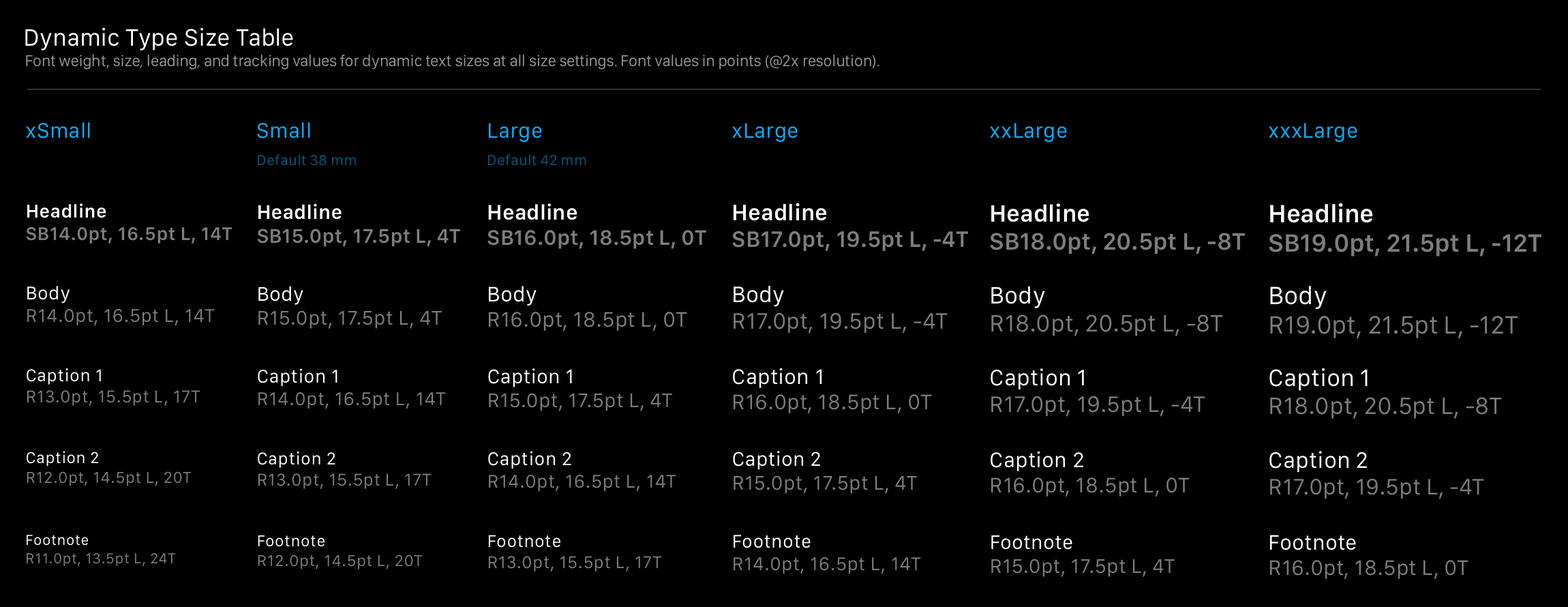
<style>
.page{position:relative;width:1568px;height:607px;background:#000000}
.page>*{position:absolute;margin:0}
.t1{font:24.5px "SanFranciscoText-Regular";letter-spacing:-0.005em;color:#ffffff}
.t2{font:16.4px "SanFranciscoDisplay-Regular";letter-spacing:-0.005em;color:#999999}
.t3{font:21.8px "SanFranciscoText-Regular";color:#06b0ff}
.t4{font:15px "SanFranciscoText-Regular";color:#035880}
.t5{font:19.1px/22.5px "SanFranciscoText-Semibold";letter-spacing:0.014em;color:#7d7d7d}
.t6{font:19.1px/22.5px "SanFranciscoText-Semibold";letter-spacing:0.014em;color:#ffffff}
.t7{font:20.5px/23.9px "SanFranciscoText-Semibold";letter-spacing:0.004em;color:#7d7d7d}
.t8{font:20.5px/23.9px "SanFranciscoText-Semibold";letter-spacing:0.004em;color:#ffffff}
.t9{font:21.8px/25.2px "SanFranciscoText-Semibold";color:#7d7d7d}
.t10{font:21.8px/25.2px "SanFranciscoText-Semibold";color:#ffffff}
.t11{font:23.2px/26.6px "SanFranciscoText-Semibold";letter-spacing:-0.004em;color:#7d7d7d}
.t12{font:23.2px/26.6px "SanFranciscoText-Semibold";letter-spacing:-0.004em;color:#ffffff}
.t13{font:24.5px/28px "SanFranciscoText-Semibold";letter-spacing:-0.008em;color:#7d7d7d}
.t14{font:24.5px/28px "SanFranciscoText-Semibold";letter-spacing:-0.008em;color:#ffffff}
.t15{font:25.9px/29.3px "SanFranciscoText-Semibold";letter-spacing:-0.012em;color:#7d7d7d}
.t16{font:25.9px/29.3px "SanFranciscoText-Semibold";letter-spacing:-0.012em;color:#ffffff}
.t17{font:19.1px/22.5px "SanFranciscoText-Regular";letter-spacing:0.014em;color:#7d7d7d}
.t18{font:19.1px/22.5px "SanFranciscoText-Regular";letter-spacing:0.014em;color:#ffffff}
.t19{font:20.5px/23.9px "SanFranciscoText-Regular";letter-spacing:0.004em;color:#7d7d7d}
.t20{font:20.5px/23.9px "SanFranciscoText-Regular";letter-spacing:0.004em;color:#ffffff}
.t21{font:21.8px/25.2px "SanFranciscoText-Regular";color:#7d7d7d}
.t22{font:21.8px/25.2px "SanFranciscoText-Regular";color:#ffffff}
.t23{font:23.2px/26.6px "SanFranciscoText-Regular";letter-spacing:-0.004em;color:#7d7d7d}
.t24{font:23.2px/26.6px "SanFranciscoText-Regular";letter-spacing:-0.004em;color:#ffffff}
.t25{font:24.5px/28px "SanFranciscoText-Regular";letter-spacing:-0.008em;color:#7d7d7d}
.t26{font:24.5px/28px "SanFranciscoText-Regular";letter-spacing:-0.008em;color:#ffffff}
.t27{font:25.9px/29.3px "SanFranciscoText-Regular";letter-spacing:-0.012em;color:#7d7d7d}
.t28{font:25.9px/29.3px "SanFranciscoText-Regular";letter-spacing:-0.012em;color:#ffffff}
.t29{font:17.7px/21.1px "SanFranciscoText-Regular";letter-spacing:0.017em;color:#7d7d7d}
.t30{font:17.7px/21.1px "SanFranciscoText-Regular";letter-spacing:0.017em;color:#ffffff}
.t31{font:16.4px/19.8px "SanFranciscoText-Regular";letter-spacing:0.02em;color:#7d7d7d}
.t32{font:16.4px/19.8px "SanFranciscoText-Regular";letter-spacing:0.02em;color:#ffffff}
.t33{font:15px/18.4px "SanFranciscoText-Regular";letter-spacing:0.024em;color:#7d7d7d}
.t34{font:15px/18.4px "SanFranciscoText-Regular";letter-spacing:0.024em;color:#ffffff}
</style>
<div class="page">
<p class="t1" style="left:25px;top:27px;width:268px;height:23px">Dynamic Type Size Table</p>
<p class="t2" style="left:26px;top:55px;width:853px;height:15px">Font weight, size, leading, and tracking values for dynamic text sizes at all size settings. Font values in points (@2x resolution).</p>
<p class="t3" style="left:26px;top:122px;width:64px;height:16px">xSmall</p>
<p class="t3" style="left:257px;top:122px;width:53px;height:16px">Small</p>
<p class="t3" style="left:489px;top:123px;width:53px;height:19px">Large</p>
<p class="t3" style="left:732px;top:123px;width:66px;height:19px">xLarge</p>
<p class="t3" style="left:990px;top:123px;width:77px;height:19px">xxLarge</p>
<p class="t3" style="left:1269px;top:123px;width:88px;height:19px">xxxLarge</p>
<p class="t4" style="left:258px;top:154px;width:98px;height:12px">Default 38 mm</p>
<p class="t4" style="left:488px;top:154px;width:98px;height:12px">Default 42 mm</p>
<p class="t5" style="left:26px;top:203px;width:206px;height:40px"><span class="t6">Headline<br></span>SB14.0pt, 16.5pt L, 14T</p>
<p class="t7" style="left:257px;top:203px;width:203px;height:44px"><span class="t8">Headline<br></span>SB15.0pt, 17.5pt L, 4T</p>
<p class="t9" style="left:487px;top:203px;width:219px;height:46px"><span class="t10">Headline<br></span>SB16.0pt, 18.5pt L, 0T</p>
<p class="t11" style="left:732px;top:202px;width:236px;height:49px;text-align:justify"><span class="t12">Headline<br></span>SB17.0pt, 19.5pt L, -4T</p>
<p class="t13" style="left:990px;top:203px;width:255px;height:51px"><span class="t14">Headline<br></span>SB18.0pt, 20.5pt L, -8T</p>
<p class="t15" style="left:1269px;top:202px;width:272px;height:54px"><span class="t16">Headline<br></span>SB19.0pt, 21.5pt L, -12T</p>
<p class="t17" style="left:27px;top:286px;width:188px;height:40px"><span class="t18">Body<br></span>R14.0pt, 16.5pt L, 14T</p>
<p class="t19" style="left:258px;top:286px;width:184px;height:43px"><span class="t20">Body<br></span>R15.0pt, 17.5pt L, 4T</p>
<p class="t21" style="left:489px;top:286px;width:198px;height:45px"><span class="t22">Body<br></span>R16.0pt, 18.5pt L, 0T</p>
<p class="t23" style="left:734px;top:286px;width:214px;height:47px"><span class="t24">Body<br></span>R17.0pt, 19.5pt L, -4T</p>
<p class="t25" style="left:991px;top:286px;width:232px;height:50px"><span class="t26">Body<br></span>R18.0pt, 20.5pt L, -8T</p>
<p class="t27" style="left:1270px;top:286px;width:248px;height:53px"><span class="t28">Body<br></span>R19.0pt, 21.5pt L, -12T</p>
<p class="t29" style="left:27px;top:368px;width:173px;height:38px"><span class="t30">Caption 1<br></span>R13.0pt, 15.5pt L, 17T</p>
<p class="t17" style="left:258px;top:368px;width:188px;height:41px"><span class="t18">Caption 1<br></span>R14.0pt, 16.5pt L, 14T</p>
<p class="t19" style="left:488px;top:368px;width:184px;height:43px"><span class="t20">Caption 1<br></span>R15.0pt, 17.5pt L, 4T</p>
<p class="t21" style="left:733px;top:367px;width:199px;height:46px"><span class="t22">Caption 1<br></span>R16.0pt, 18.5pt L, 0T</p>
<p class="t23" style="left:991px;top:368px;width:214px;height:49px"><span class="t24">Caption 1<br></span>R17.0pt, 19.5pt L, -4T</p>
<p class="t25" style="left:1269px;top:367px;width:233px;height:52px"><span class="t26">Caption 1<br></span>R18.0pt, 20.5pt L, -8T</p>
<p class="t31" style="left:27px;top:451px;width:165px;height:35px"><span class="t32">Caption 2<br></span>R12.0pt, 14.5pt L, 20T</p>
<p class="t29" style="left:258px;top:451px;width:174px;height:38px"><span class="t30">Caption 2<br></span>R13.0pt, 15.5pt L, 17T</p>
<p class="t17" style="left:488px;top:451px;width:188px;height:41px"><span class="t18">Caption 2<br></span>R14.0pt, 16.5pt L, 14T</p>
<p class="t19" style="left:733px;top:451px;width:184px;height:43px"><span class="t20">Caption 2<br></span>R15.0pt, 17.5pt L, 4T</p>
<p class="t21" style="left:991px;top:451px;width:199px;height:45px"><span class="t22">Caption 2<br></span>R16.0pt, 18.5pt L, 0T</p>
<p class="t23" style="left:1269px;top:451px;width:215px;height:48px"><span class="t24">Caption 2<br></span>R17.0pt, 19.5pt L, -4T</p>
<p class="t33" style="left:27px;top:534px;width:149px;height:33px"><span class="t34">Footnote<br></span>R11.0pt, 13.5pt L, 24T</p>
<p class="t31" style="left:258px;top:535px;width:165px;height:34px"><span class="t32">Footnote<br></span>R12.0pt, 14.5pt L, 20T</p>
<p class="t29" style="left:488px;top:534px;width:174px;height:37px"><span class="t30">Footnote<br></span>R13.0pt, 15.5pt L, 17T</p>
<p class="t17" style="left:734px;top:534px;width:187px;height:40px"><span class="t18">Footnote<br></span>R14.0pt, 16.5pt L, 14T</p>
<p class="t19" style="left:991px;top:535px;width:184px;height:42px"><span class="t20">Footnote<br></span>R15.0pt, 17.5pt L, 4T</p>
<p class="t21" style="left:1270px;top:534px;width:198px;height:45px"><span class="t22">Footnote<br></span>R16.0pt, 18.5pt L, 0T</p>
</div>
